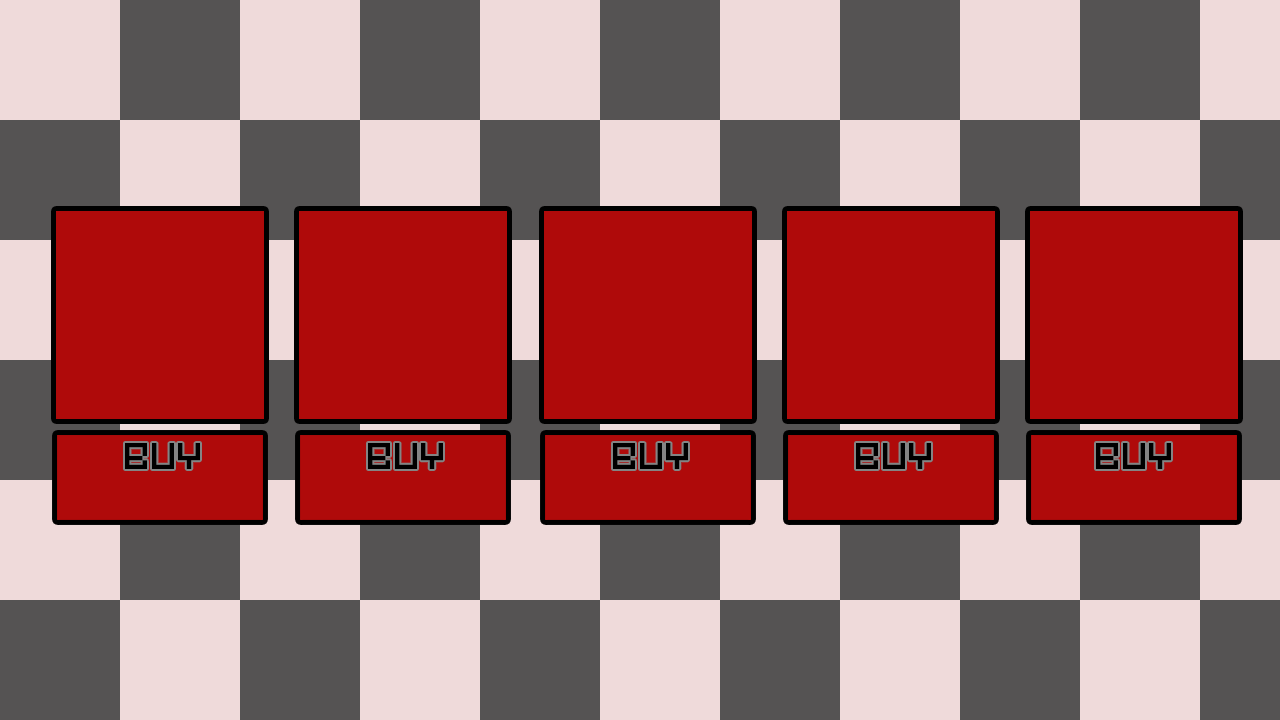
<style>
.page{position:relative;width:1280px;height:720px;background:#efdada}
.page>*{position:absolute;margin:0}
.t1{font:34.8px "Pixel-Art";color:#000000}
</style>
<div class="page">
<p class="t1" style="left:125px;top:443px;width:75px;height:26px">BUY</p>
<p class="t1" style="left:368px;top:443px;width:75px;height:26px">BUY</p>
<p class="t1" style="left:613px;top:443px;width:75px;height:26px">BUY</p>
<p class="t1" style="left:856px;top:443px;width:75px;height:26px">BUY</p>
<p class="t1" style="left:1096px;top:443px;width:75px;height:26px">BUY</p>
</div>
